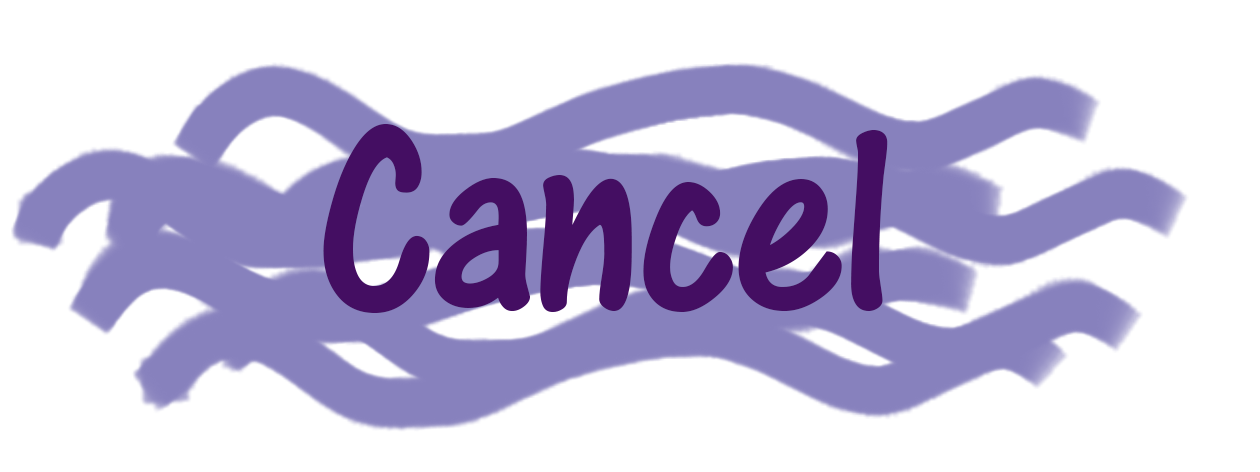
<style>
.page{position:relative;width:1260px;height:472px;background:#ffffff}
.page>*{position:absolute;margin:0}
.t1{font:277.8px "ARCENA";letter-spacing:-0.025em;color:#440e62}
</style>
<div class="page">
<p class="t1" style="left:323px;top:124px;width:565px;height:189px">Cancel</p>
</div>
